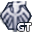
<style>
.page{position:relative;width:32px;height:32px;background:#ffffff}
.page>*{position:absolute;margin:0}
.t1{font:10px "MicrosoftYaHeiUI-Bold";color:#ffffff}
</style>
<div class="page">
<p class="t1" style="left:17px;top:23px;width:14px;height:8px;opacity:0.72">GT</p>
</div>
